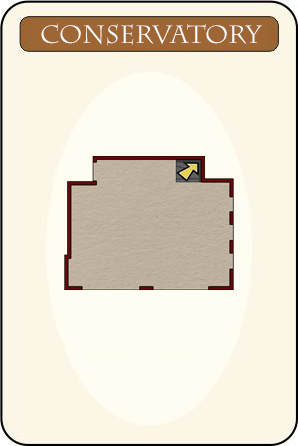
<style>
.page{position:relative;width:298px;height:446px;background:#fcf6e6}
.page>*{position:absolute;margin:0}
.t1{font:25px "CharlemagneStd-Regular";color:#ffffff}
</style>
<div class="page">
<p class="t1" style="left:41px;top:23px;width:221px;height:23px">conservatory</p>
</div>
